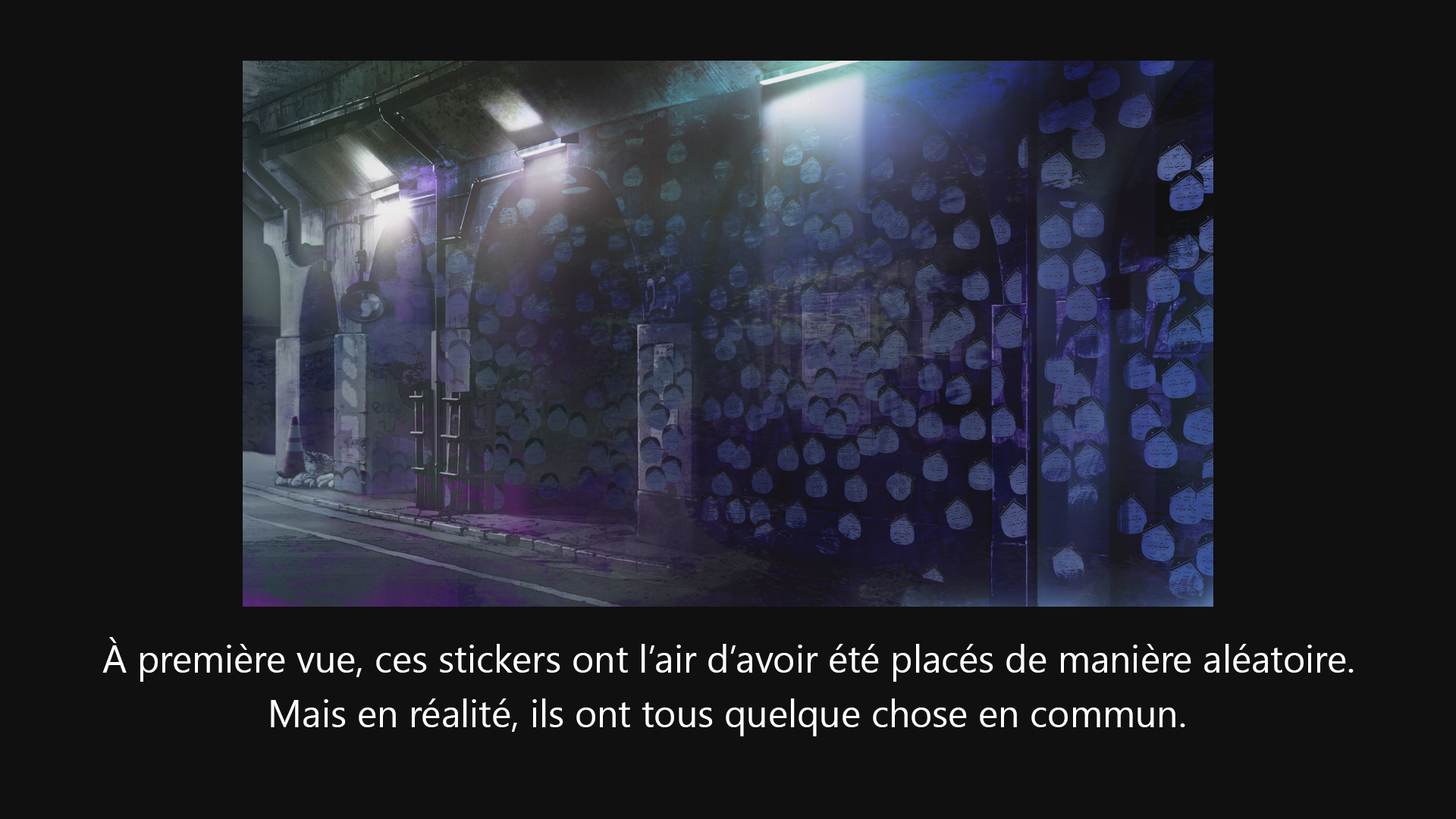
<style>
.page{position:relative;width:1456px;height:819px;background:#101010}
.page>*{position:absolute;margin:0}
.t1{font:37.9px "SegoeUIHistoric";color:#ffffff}
</style>
<div class="page">
<p class="t1" style="left:102px;top:637px;width:1252px;height:45px">À première vue, ces stickers ont l’air d’avoir été placés de manière aléatoire.</p>
<p class="t1" style="left:271px;top:698px;width:914px;height:38px">Mais en réalité, ils ont tous quelque chose en commun.</p>
</div>
